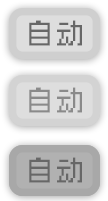
<style>
.page{position:relative;width:108px;height:201px}
.page>*{position:absolute;margin:0}
.t1{font:27.3px "Zpix";color:#676767}
.t2{font:27.3px "Zpix";color:#8a8a8a}
</style>
<div class="page">
<p class="t1" style="left:29px;top:20px;width:53px;height:26px">自动</p>
<p class="t2" style="left:29px;top:87px;width:53px;height:26px">自动</p>
<p class="t1" style="left:29px;top:157px;width:53px;height:26px">自动</p>
</div>
